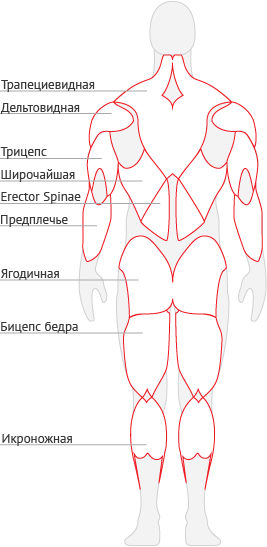
<style>
.page{position:relative;width:267px;height:547px;background:#ffffff}
.page>*{position:absolute;margin:0}
.t1{font:13px "PTSans-Regular";color:#373737}
</style>
<div class="page">
<p class="t1" style="left:1px;top:80px;width:94px;height:12px">Трапециевидная</p>
<p class="t1" style="left:1px;top:103px;width:79px;height:11px">Дельтовидная</p>
<p class="t1" style="left:0px;top:147px;width:47px;height:12px">Трицепс</p>
<p class="t1" style="left:1px;top:169px;width:74px;height:13px">Широчайшая</p>
<p class="t1" style="left:1px;top:192px;width:80px;height:12px">Erector Spinae</p>
<p class="t1" style="left:1px;top:215px;width:67px;height:12px">Предплечье</p>
<p class="t1" style="left:1px;top:269px;width:58px;height:11px">Ягодичная</p>
<p class="t1" style="left:1px;top:322px;width:77px;height:12px">Бицепс бедра</p>
<p class="t1" style="left:2px;top:434px;width:70px;height:12px">Икроножная</p>
</div>
